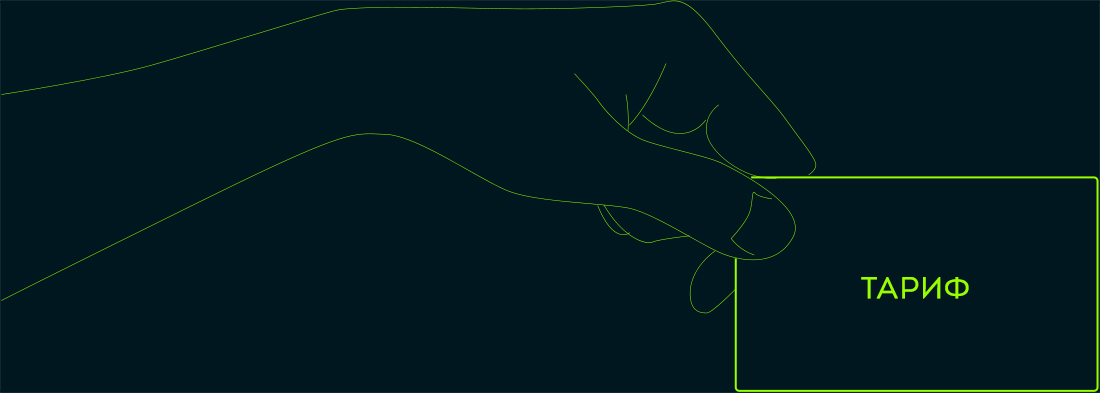
<style>
.page{position:relative;width:1100px;height:393px;background:#00171f}
.page>*{position:absolute;margin:0}
.t1{font:30.3px "Intro-Book";letter-spacing:0.05em;color:#99ff00;text-transform:uppercase}
</style>
<div class="page">
<p class="t1" style="left:861px;top:277px;width:108px;height:22px">тариф</p>
</div>
